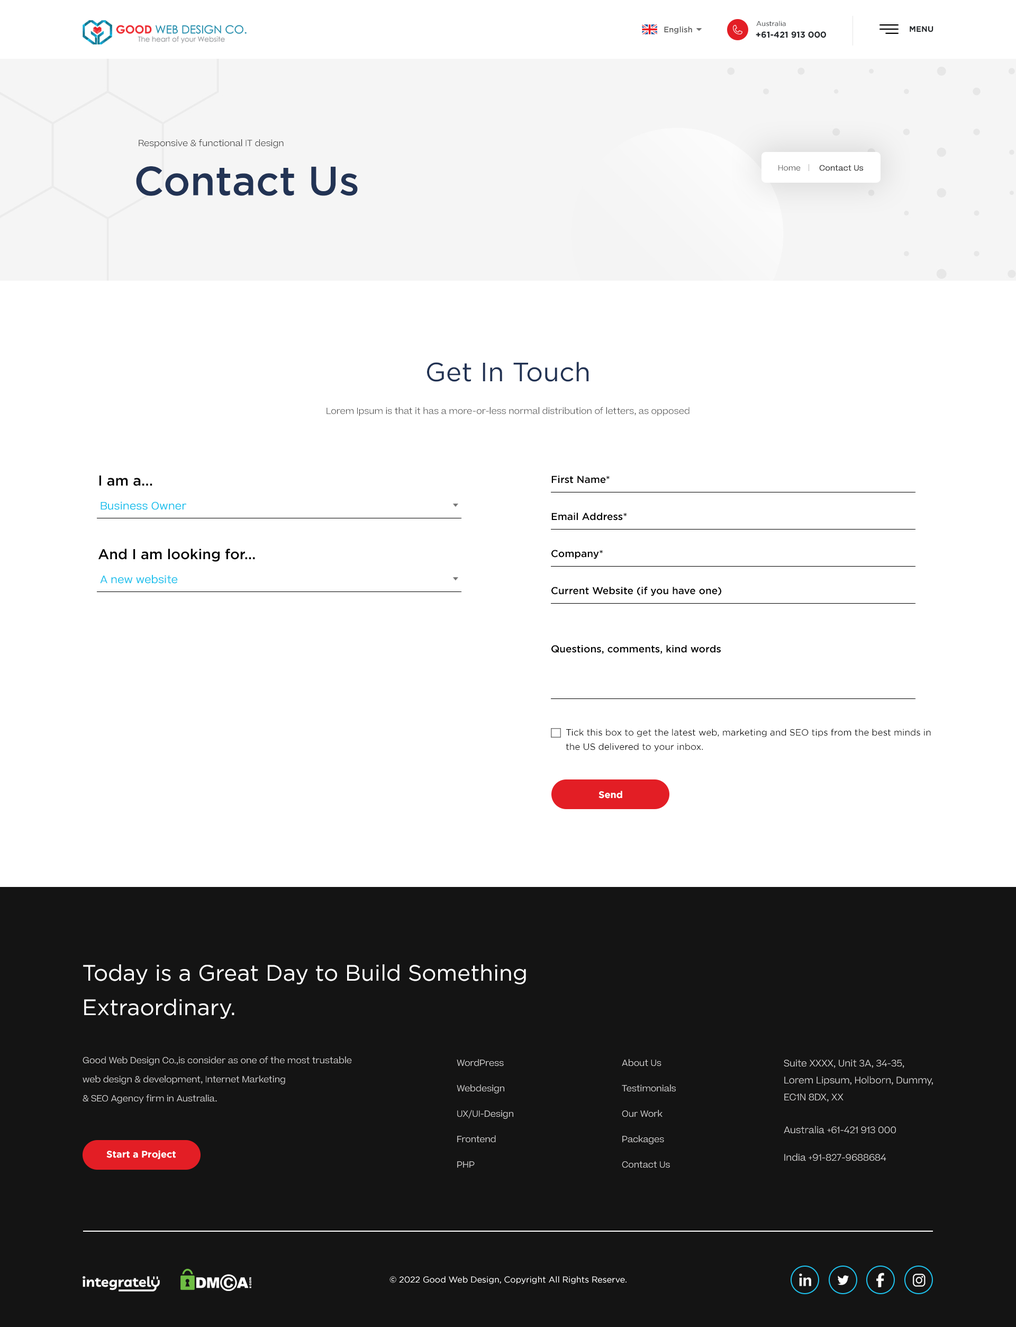
<style>
.page{position:relative;width:1016px;height:1327px;background:#ffffff}
.page>*{position:absolute;margin:0}
.t1{font:7.9px "Gotham-Medium";color:#5d5d5d}
.t2{font:6.9px "Gotham-Book";color:#212529}
.t3{font:7.9px "Gotham-Bold";color:#212529;text-transform:uppercase}
.t4{font:8.5px "Gotham-Bold";color:#212529}
.t5{font:8.5px "Beatrice-Light";color:#333333}
.t6{font:40.8px "Gotham-Medium";color:#223354}
.t7{font:7.4px "Beatrice-Light";color:#333333}
.t8{font:7.4px "Beatrice-Light";color:#333333;font-weight:bold}
.t9{font:26.5px "Gotham-Book";color:#223354}
.t10{font:8.5px "Beatrice-Light";color:#464646}
.t11{font:14.3px "Gotham-Medium";color:#000000}
.t12{font:10.1px "Gotham-Medium";color:#000000}
.t13{font:10.1px "Beatrice-Light";color:#1ec2ed;font-weight:bold}
.t14{font:9px/14.3px "Gotham-Book";color:#000000}
.t15{font:9.5px "Gotham-Bold";color:#ffffff}
.t16{font:22.2px/34.4px "Gotham-Book";color:#ffffff}
.t17{font:8.5px/19.1px "Beatrice-Light";color:#dcdbdb}
.t18{font:8.5px/25.4px "Beatrice-Light";color:#dcdbdb}
.t19{font:9px/16.9px "Beatrice-Light";color:#dcdbdb}
.t20{font:9px/27.5px "Beatrice-Light";color:#dcdbdb}
.t21{font:8.5px "Gotham-Book";color:#ffffff}
</style>
<div class="page">
<p class="t1" style="left:664px;top:26px;width:28px;height:8px">English</p>
<p class="t2" style="left:757px;top:21px;width:29px;height:5px">Australia</p>
<p class="t3" style="left:910px;top:26px;width:24px;height:6px">Menu</p>
<p class="t4" style="left:756px;top:31px;width:70px;height:7px">+61-421 913 000</p>
<p class="t5" style="left:139px;top:139px;width:145px;height:9px">Responsive &amp; functional IT design</p>
<p class="t6" style="left:136px;top:166px;width:222px;height:30px">Contact Us</p>
<p class="t7" style="left:779px;top:165px;width:22px;height:6px">Home</p>
<p class="t8" style="left:820px;top:165px;width:44px;height:6px">Contact Us</p>
<p class="t9" style="left:427px;top:362px;width:162px;height:20px">Get In Touch</p>
<p class="t10" style="left:327px;top:407px;width:363px;height:9px">Lorem Ipsum is that it has a more-or-less normal distribution of letters, as opposed</p>
<p class="t11" style="left:99px;top:475px;width:53px;height:11px">I am a...</p>
<p class="t12" style="left:552px;top:475px;width:58px;height:8px">First Name*</p>
<p class="t13" style="left:101px;top:501px;width:86px;height:9px">Business Owner</p>
<p class="t12" style="left:552px;top:512px;width:75px;height:8px">Email Address*</p>
<p class="t11" style="left:98px;top:548px;width:157px;height:14px">And I am looking for...</p>
<p class="t12" style="left:552px;top:550px;width:51px;height:9px">Company*</p>
<p class="t13" style="left:100px;top:574px;width:78px;height:9px">A new website</p>
<p class="t12" style="left:552px;top:587px;width:170px;height:9px">Current Website (if you have one)</p>
<p class="t12" style="left:552px;top:645px;width:169px;height:9px">Questions, comments, kind words</p>
<p class="t14" style="left:566px;top:728px;width:365px;height:23px">Tick this box to get the latest web, marketing and SEO tips from the best minds in<br>the US delivered to your inbox.</p>
<p class="t15" style="left:599px;top:790px;width:24px;height:8px">Send</p>
<p class="t16" style="left:83px;top:964px;width:443px;height:55px">Today is a Great Day to Build Something<br>Extraordinary.</p>
<p class="t17" style="left:83px;top:1056px;width:269px;height:47px">Good Web Design Co.,is consider as one of the most trustable<br>web design &amp; development, Internet Marketing<br>&amp; SEO Agency firm in Australia.</p>
<p class="t18" style="left:457px;top:1059px;width:57px;height:108px">WordPress<br>Webdesign<br>UX/UI-Design<br>Frontend<br>PHP</p>
<p class="t18" style="left:622px;top:1059px;width:54px;height:109px">About Us<br>Testimonials<br>Our Work<br>Packages<br>Contact Us</p>
<p class="t19" style="left:784px;top:1059px;width:149px;height:43px">Suite XXXX, Unit 3A, 34-35,<br>Lorem Lipsum, Holborn, Dummy,<br>EC1N 8DX, XX</p>
<p class="t20" style="left:784px;top:1126px;width:112px;height:35px">Australia +61-421 913 000<br>India +91-827-9688684</p>
<p class="t15" style="left:106px;top:1150px;width:70px;height:9px">Start a Project</p>
<p class="t21" style="left:390px;top:1276px;width:237px;height:8px">© 2022 Good Web Design, Copyright All Rights Reserve.</p>
</div>
